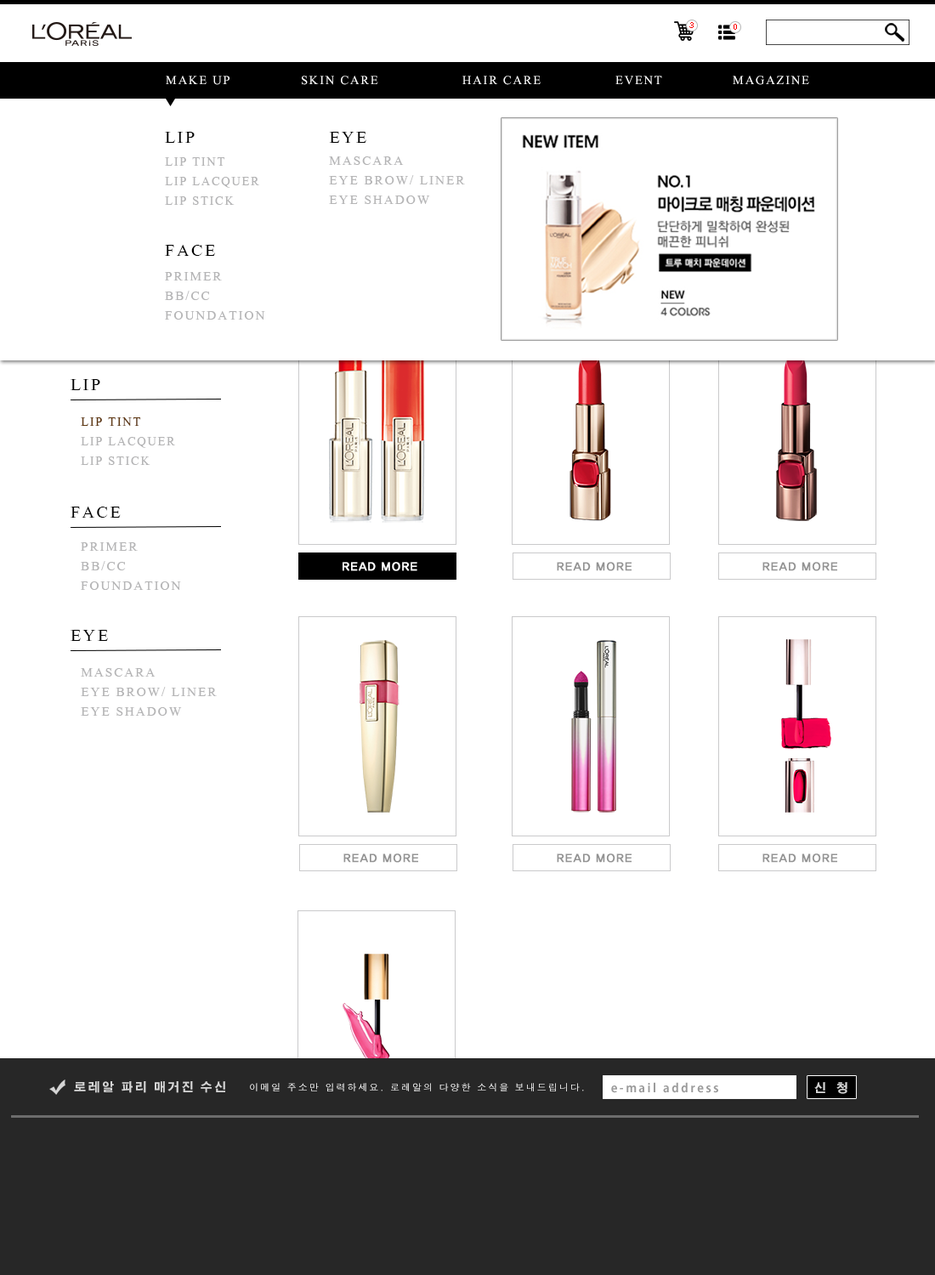
<style>
.page{position:relative;width:935px;height:1275px;background:#ffffff}
.page>*{position:absolute;margin:0}
.t1{font:7.2px "Haansoft-Dotum";color:#fe0000;font-variant:small-caps}
.t2{font:15.3px "Aparajita";letter-spacing:0.1em;color:#ffffff}
.t3{font:21.3px "Aparajita";letter-spacing:0.1em;color:#010101;text-transform:uppercase}
.t4{font:21.3px "Aparajita";letter-spacing:0.1em;color:#000000;text-transform:uppercase}
.t5{font:16.2px "Aparajita";letter-spacing:0.1em;color:#b5b5b6;text-transform:uppercase;scale:0.94 1}
.t6{font:16.2px "Aparajita";letter-spacing:0.1em;color:#b5b5b6;text-transform:uppercase}
.t7{font:16.2px "Aparajita";letter-spacing:0.1em;color:#603913;text-transform:uppercase;scale:0.94 1}
.t8{font:11.9px "HaanYGodic23";color:#ffffff;font-variant:small-caps;font-weight:bold}
.t9{font:11.9px "AdobeGothicStd-Bold";letter-spacing:0.18em;color:#d5d5d5;text-transform:uppercase}
.t10{font:9.4px "Haansoft-Dotum";letter-spacing:0.18em;color:#ffffff;text-transform:uppercase}
.t11{font:11.9px "AdobeGothicStd-Bold";letter-spacing:0.18em;color:#9b9b9b}
.t12{font:11.9px "AdobeGothicStd-Bold";color:#d5d5d5;text-transform:uppercase}
</style>
<div class="page">
<p class="t1" style="left:689px;top:22px;width:5px;height:6px">3</p>
<p class="t1" style="left:734px;top:24px;width:3px;height:6px">0</p>
<p class="t2" style="left:166px;top:76px;width:64px;height:9px">MAKE UP</p>
<p class="t2" style="left:302px;top:76px;width:76px;height:9px">SKIN CARE</p>
<p class="t2" style="left:462px;top:76px;width:79px;height:9px">HAIR CARE</p>
<p class="t2" style="left:615px;top:76px;width:47px;height:9px">EVENT</p>
<p class="t2" style="left:733px;top:76px;width:76px;height:9px">MAGAZINE</p>
<p class="t3" style="left:165px;top:132px;width:30px;height:11px">LIP</p>
<p class="t4" style="left:329px;top:132px;width:37px;height:11px">EYE</p>
<p class="t5" style="left:165px;top:157px;width:94px;height:48px">LIP TINT<br>lip Lacquer<br>Lip stick</p>
<p class="t6" style="left:329px;top:156px;width:136px;height:48px">mascara<br>eye brow/ LINER<br>eye shadow</p>
<p class="t4" style="left:165px;top:245px;width:50px;height:11px">FACE</p>
<p class="t6" style="left:165px;top:272px;width:100px;height:48px">PRIMER<br>BB/CC<br>foundation</p>
<p class="t3" style="left:71px;top:379px;width:29px;height:11px">LIP</p>
<p class="t5" style="left:81px;top:417px;width:94px;height:48px"><span class="t7">LIP TINT<br></span>lip Lacquer<br>Lip stick</p>
<p class="t3" style="left:71px;top:507px;width:50px;height:11px">FACE</p>
<p class="t6" style="left:81px;top:542px;width:100px;height:48px">PRIMER<br>BB/CC<br>foundation</p>
<p class="t8" style="left:343px;top:562px;width:74px;height:9px">READ MORE</p>
<p class="t3" style="left:71px;top:630px;width:37px;height:11px">EYE</p>
<p class="t6" style="left:81px;top:668px;width:136px;height:48px">mascara<br>eye brow/ LINER<br>eye shadow</p>
<p class="t9" style="left:74px;top:1081px;width:151px;height:12px">로레알 파리 매거진 수신</p>
<p class="t10" style="left:250px;top:1083px;width:334px;height:9px">이메일 주소만 입력하세요. 로레알의 다양한 소식을 보내드립니다.</p>
<p class="t11" style="left:611px;top:1082px;width:107px;height:11px">e-mail address</p>
<p class="t12" style="left:814px;top:1082px;width:34px;height:12px">신    청</p>
</div>
